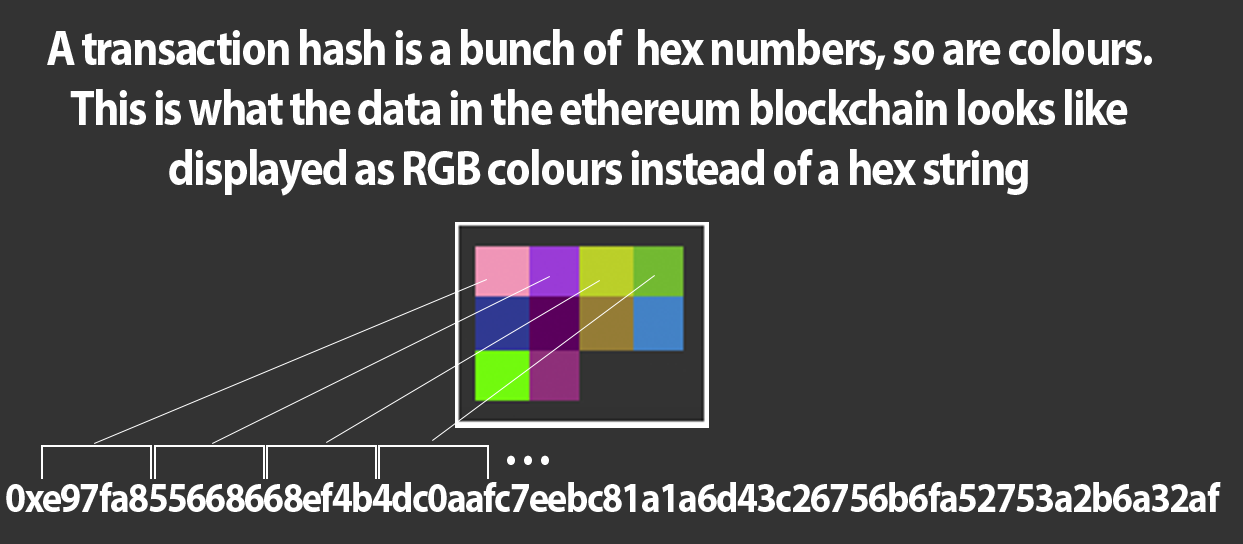
<style>
.page{position:relative;width:1243px;height:544px;background:#333333}
.page>*{position:absolute;margin:0}
.t1{font:12px "MyriadPro-Bold";letter-spacing:-0.04em;color:#ffffff;scale:0.9 1}
.t2{font:41.7px "MyriadPro-Bold";letter-spacing:-0.04em;color:#ffffff;scale:0.9 1}
</style>
<div class="page">
<p class="t1" style="left:47px;top:29px;width:1105px;height:167px;text-align:center">A transaction hash is a bunch of  hex numbers, so are colours. <br>This is what the data in the ethereum blockchain looks like <br>displayed as RGB colours instead of a hex string</p>
<p class="t1" style="left:507px;top:455px;width:42px;height:10px">. . .</p>
<p class="t2" style="left:6px;top:482px;width:1215px;height:30px">0xe97fa855668668ef4b4dc0aafc7eebc81a1a6d43c26756b6fa52753a2b6a32af</p>
</div>
